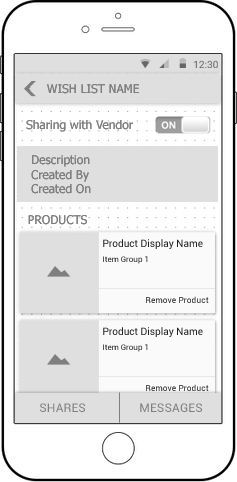
<style>
.page{position:relative;width:237px;height:482px;background:#dfdfdf}
.page>*{position:absolute;margin:0}
.t1{font:12px "Tahoma";color:#7f7f7f}
.t2{font:12.3px "Roboto-Regular";letter-spacing:0.005em;color:#7f7f7f}
</style>
<div class="page">
<p class="t1" style="left:47px;top:84px;width:92px;height:10px">WISH LIST NAME</p>
<p class="t1" style="left:26px;top:120px;width:107px;height:12px">Sharing with Vendor</p>
<p class="t1" style="left:31px;top:155px;width:60px;height:39px">Description<br>Created By<br>Created On</p>
<p class="t1" style="left:28px;top:215px;width:59px;height:10px">PRODUCTS</p>
<p class="t2" style="left:40px;top:403px;width:162px;height:9px">SHARES                 MESSAGES</p>
</div>
